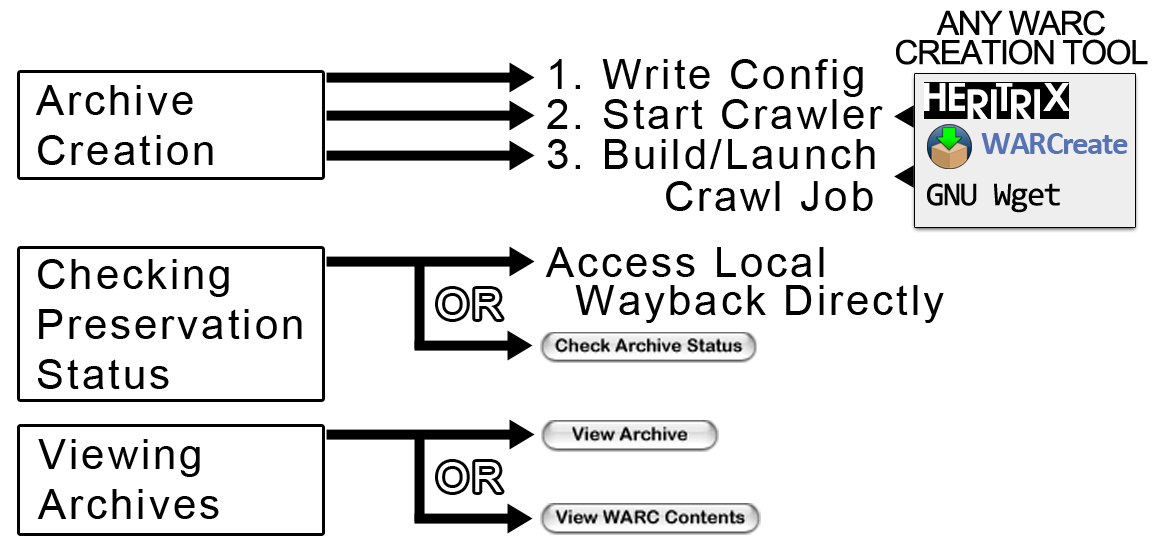
<style>
.page{position:relative;width:1161px;height:560px;background:#ffffff}
.page>*{position:absolute;margin:0}
.t1{font:33.3px/29.2px "ArialMT";letter-spacing:-0.045em;color:#000000}
.t2{font:41.7px "ArialMT";letter-spacing:0.075em;color:#000000}
.t3{font:33.3px "Calibri-Bold";letter-spacing:-0.045em;color:#5773b4}
.t4{font:41.7px/41.7px "ArialMT";letter-spacing:0.075em;color:#000000}
.t5{font:33.3px "Consolas";letter-spacing:-0.045em;color:#000000}
.t6{font:41.7px/37.5px "ArialMT";letter-spacing:0.075em;color:#000000}
.t7{font:41.7px "ArialMT";letter-spacing:0.075em;color:#ffffff}
</style>
<div class="page">
<p class="t1" style="left:896px;top:10px;width:252px;height:55px;text-align:center">ANY WARC<br>CREATION TOOL</p>
<p class="t2" style="left:550px;top:59px;width:313px;height:38px">1. Write Config</p>
<p class="t2" style="left:35px;top:85px;width:178px;height:80px">Archive<br>Creation</p>
<p class="t2" style="left:547px;top:99px;width:336px;height:30px">2. Start Crawler</p>
<p class="t3" style="left:981px;top:133px;width:147px;height:21px">WARCreate</p>
<p class="t4" style="left:547px;top:139px;width:328px;height:72px">3. Build/Launch<br>        Crawl Job</p>
<p class="t5" style="left:927px;top:183px;width:133px;height:30px">GNU Wget</p>
<p class="t6" style="left:545px;top:247px;width:399px;height:76px">Access Local<br>  Wayback Directly</p>
<p class="t2" style="left:37px;top:259px;width:265px;height:130px">Checking<br>Preservation<br>Status</p>
<p class="t7" style="left:438px;top:289px;width:64px;height:30px">OR</p>
<p class="t2" style="left:37px;top:439px;width:182px;height:80px">Viewing<br>Archives</p>
<p class="t7" style="left:438px;top:462px;width:64px;height:30px">OR</p>
</div>
